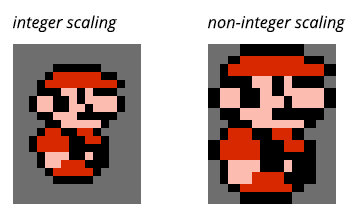
<style>
.page{position:relative;width:358px;height:222px;background:#ffffff}
.page>*{position:absolute;margin:0}
.t1{font:16.4px "OpenSans-Italic";color:#000000}
</style>
<div class="page">
<p class="t1" style="left:13px;top:15px;width:104px;height:17px">integer scaling</p>
<p class="t1" style="left:208px;top:15px;width:138px;height:17px">non-integer scaling</p>
</div>
